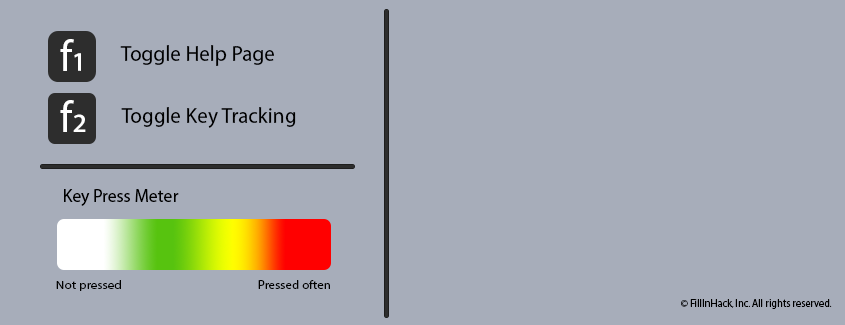
<style>
.page{position:relative;width:845px;height:325px;background:#a7adba}
.page>*{position:absolute;margin:0}
.t1{font:44.5px "MyriadPro-Regular";color:#ffffff;scale:0.95 1}
.t2{font:22.3px "MyriadPro-Regular";color:#000000;scale:0.95 1}
.t3{font:18px "MyriadPro-Regular";color:#000000}
.t4{font:11.6px "MyriadPro-Regular";color:#000000;scale:1.14 1}
.t5{font:12.4px "MyriadPro-Regular";color:#000000;scale:1.04 1}
.t6{font:10.6px "MyriadPro-Regular";color:#000000}
</style>
<div class="page">
<p class="t1" style="left:60px;top:39px;width:21px;height:32px">f1</p>
<p class="t2" style="left:120px;top:45px;width:154px;height:21px">Toggle Help Page</p>
<p class="t1" style="left:60px;top:100px;width:26px;height:32px">f2</p>
<p class="t2" style="left:121px;top:107px;width:175px;height:21px">Toggle Key Tracking</p>
<p class="t3" style="left:64px;top:189px;width:115px;height:17px">Key Press Meter</p>
<p class="t4" style="left:56px;top:280px;width:65px;height:11px">Not pressed</p>
<p class="t5" style="left:258px;top:280px;width:72px;height:9px">Pressed often</p>
<p class="t6" style="left:681px;top:299px;width:151px;height:10px">© FillInHack, Inc. All rights reserved.</p>
</div>
